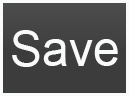
<style>
.page{position:relative;width:129px;height:96px;background:#3c3c3c}
.page>*{position:absolute;margin:0}
.t1{font:48px "ArialMT";color:#f9fbfa}
</style>
<div class="page">
<p class="t1" style="left:12px;top:30px;width:106px;height:37px">Save</p>
</div>
